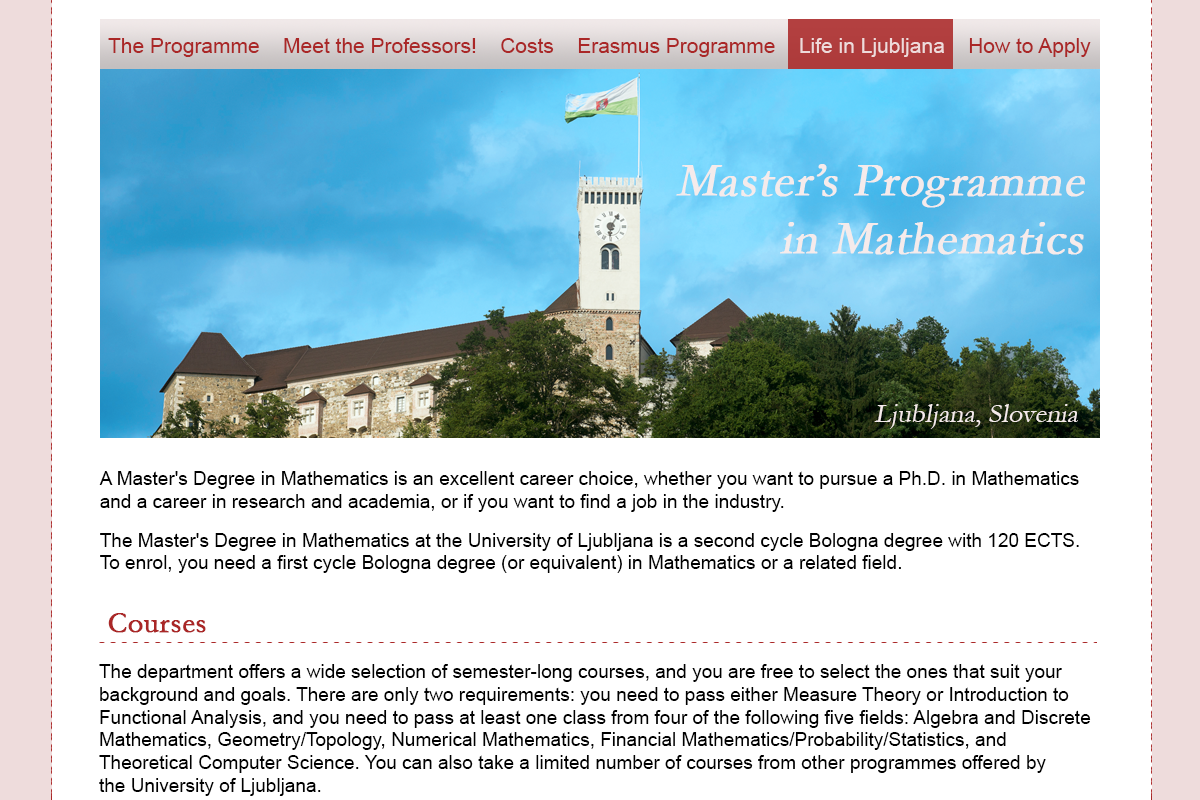
<style>
.page{position:relative;width:1200px;height:800px;background:#ffffff}
.page>*{position:absolute;margin:0}
.t1{font:21px "ArialMT";color:#aa2727}
.t2{font:21px "ArialMT";color:#eedbdb}
.t3{font:48px "Garamond";color:#f5ebeb;font-weight:bold;font-style:italic}
.t4{font:28px "Garamond";color:#f5ebeb;font-style:italic}
.t5{font:19px "ArialMT";color:#000000}
.t6{font:30px "Garamond";color:#aa2727;font-weight:bold}
</style>
<div class="page">
<p class="t1" style="left:108px;top:38px;width:983px;height:19px">The Programme    Meet the Professors!    Costs    Erasmus Programme    <span class="t2">Life in Ljubljana</span>    How to Apply</p>
<p class="t3" style="left:676px;top:164px;width:409px;height:91px;text-align:right">Master’s Programme<br>in Mathematics</p>
<p class="t4" style="left:874px;top:404px;width:204px;height:25px">Ljubljana, Slovenia</p>
<p class="t5" style="left:99px;top:471px;width:980px;height:41px">A Master's Degree in Mathematics is an excellent career choice, whether you want to pursue a Ph.D. in Mathematics <br>and a career in research and academia, or if you want to find a job in the industry.</p>
<p class="t5" style="left:100px;top:533px;width:979px;height:40px">The Master's Degree in Mathematics at the University of Ljubljana is a second cycle Bologna degree with 120 ECTS.<br>To enrol, you need a first cycle Bologna degree (or equivalent) in Mathematics or a related field.</p>
<p class="t6" style="left:108px;top:613px;width:98px;height:20px">Courses</p>
<p class="t5" style="left:99px;top:664px;width:992px;height:132px">The department offers a wide selection of semester-long courses, and you are free to select the ones that suit your <br>background and goals. There are only two requirements: you need to pass either Measure Theory or Introduction to <br>Functional Analysis, and you need to pass at least one class from four of the following five fields: Algebra and Discrete <br>Mathematics, Geometry/Topology, Numerical Mathematics, Financial Mathematics/Probability/Statistics, and <br>Theoretical Computer Science. You can also take a limited number of courses from other programmes offered by <br>the University of Ljubljana.</p>
</div>
